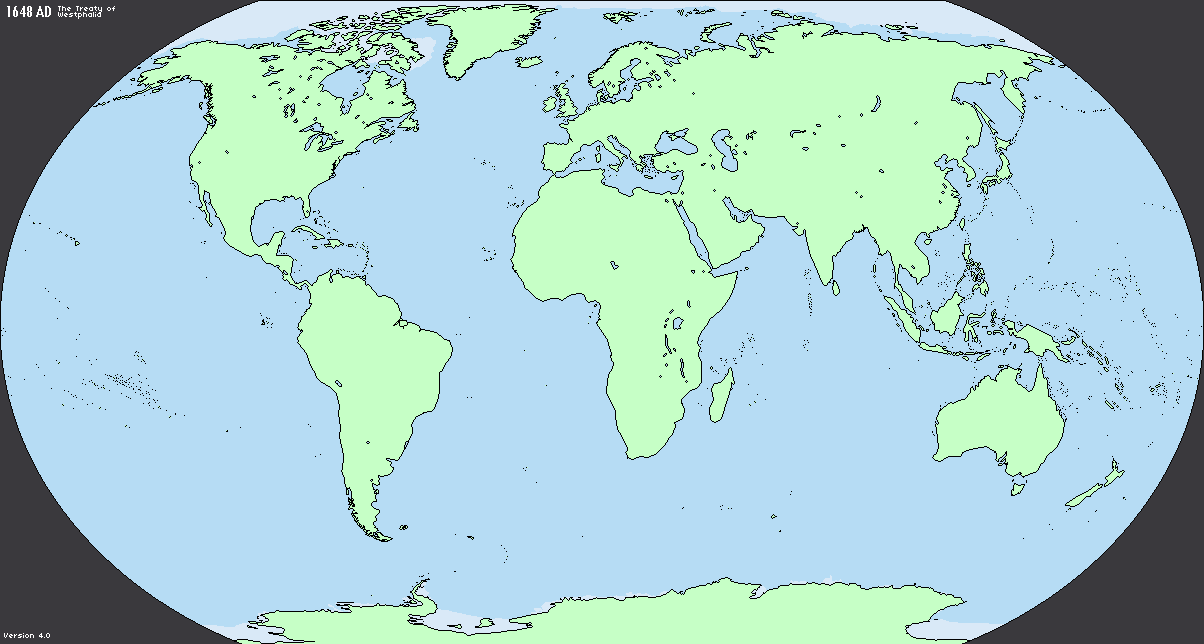
<style>
.page{position:relative;width:1204px;height:644px;background:#b6dcf4}
.page>*{position:absolute;margin:0}
.t1{font:18px "TwCenMT-Condensed";color:#ffffff;font-variant:small-caps}
.t2{font:8px "04b03";color:#ffffff}
</style>
<div class="page">
<p class="t1" style="left:7px;top:6px;width:44px;height:11px">1648 AD</p>
<p class="t2" style="left:58px;top:6px;width:57px;height:7px">The Treaty of</p>
<p class="t2" style="left:58px;top:12px;width:43px;height:7px">Westphalia</p>
<p class="t2" style="left:4px;top:633px;width:46px;height:5px">Version 4.0</p>
</div>
